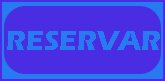
<style>
.page{position:relative;width:165px;height:81px;background:#4a2ce2}
.page>*{position:absolute;margin:0}
.t1{font:28.2px "ErasITC-Bold";color:#277bf1}
</style>
<div class="page">
<p class="t1" style="left:7px;top:31px;width:153px;height:19px">RESERVAR</p>
</div>
